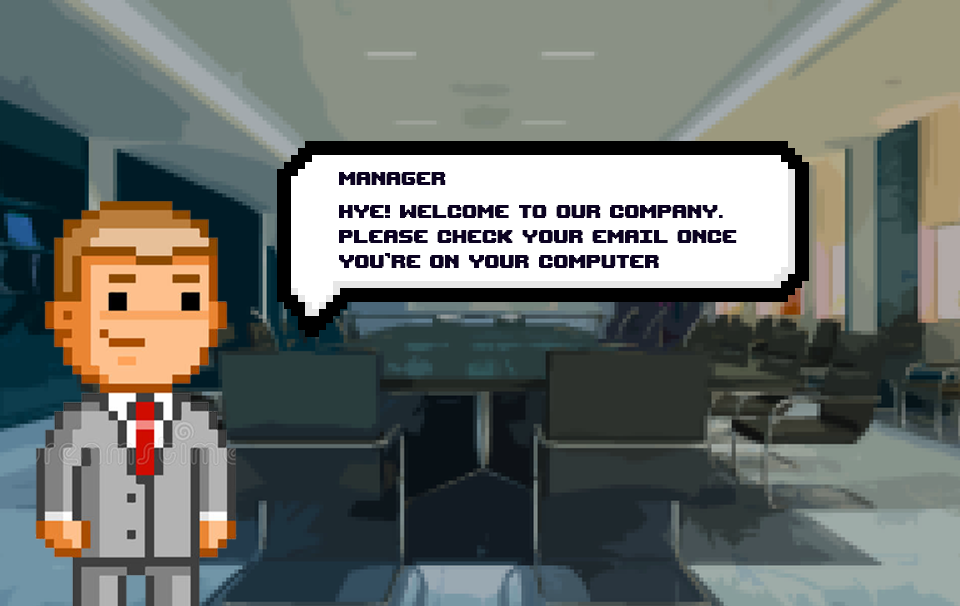
<style>
.page{position:relative;width:960px;height:606px}
.page>*{position:absolute;margin:0}
.t1{font:25px/25px "UpheavalTT-BRK-";color:#0c0322}
.t2{font:25px/33.3px "UpheavalTT-BRK-";color:#0c0322}
</style>
<div class="page">
<p class="t1" style="left:339px;top:172px;width:398px;height:96px"><span class="t2">manager<br>Hye! welcome to our company. </span>please check your email once you’re on your computer</p>
</div>
